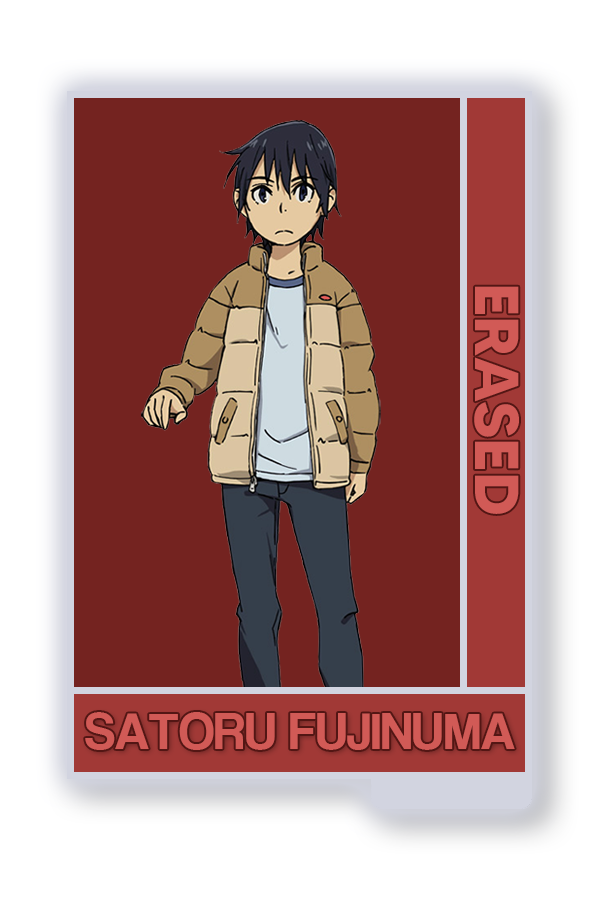
<style>
.page{position:relative;width:600px;height:900px;background:#742320}
.page>*{position:absolute;margin:0}
.t1{font:61.9px "MADETOMMY-Bold";color:#d15a56}
.t2{font:53.1px "CoolveticaRg-Regular";color:#d15a56}
</style>
<div class="page">
<p class="t1" style="left:474px;top:286px;width:45px;height:228px;rotate:90deg">ERASED</p>
<p class="t2" style="left:85px;top:712px;width:430px;height:38px">SATORU FUJINUMA</p>
</div>
